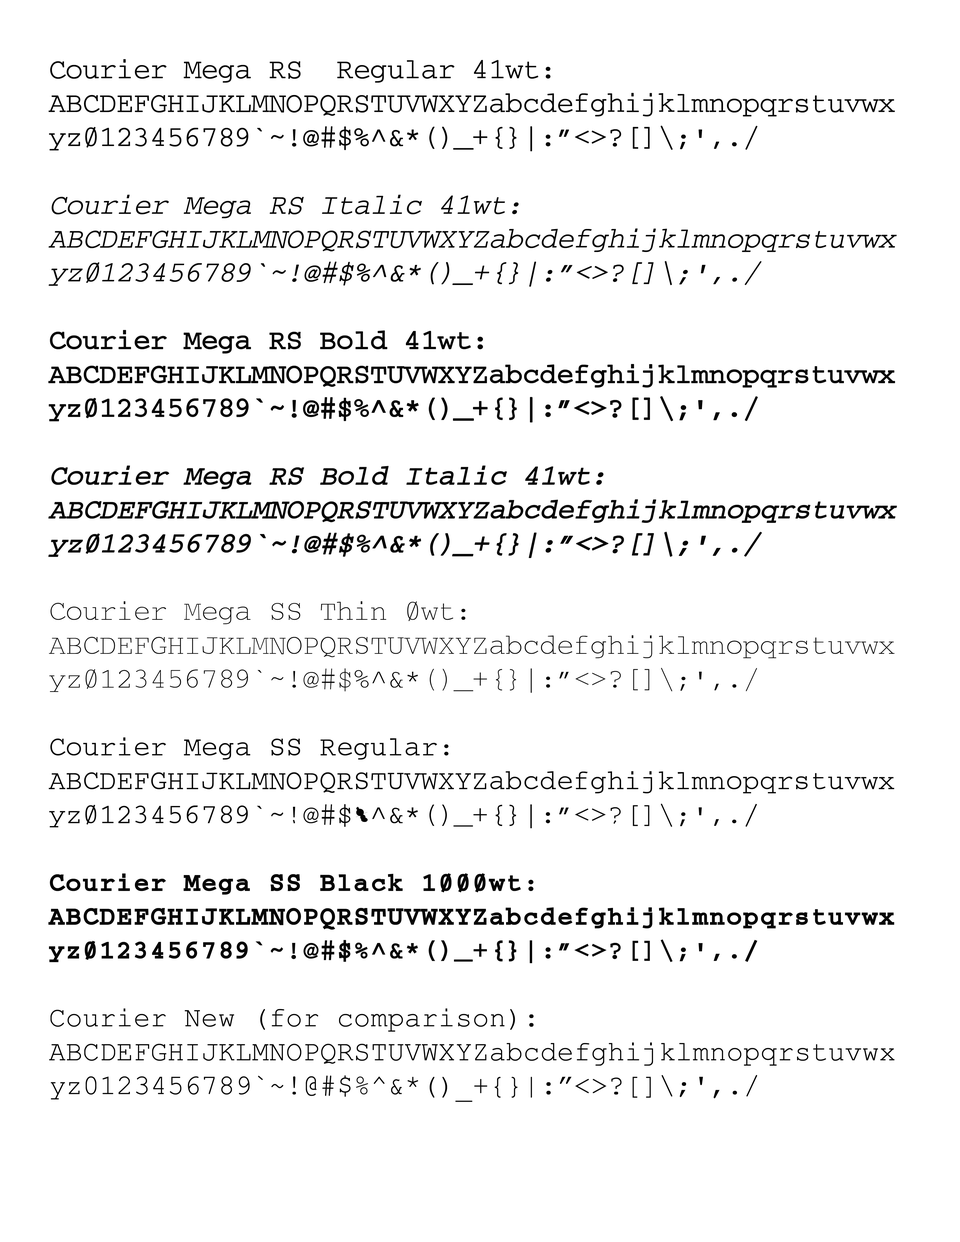
<style>
.page{position:relative;width:960px;height:1242px;background:#ffffff}
.page>*{position:absolute;margin:0}
.t1{font:28.2px "CourierMegaRS-BoldItalic";color:#050505}
.t2{font:28.2px "CourierMegaRS";color:#050505}
.t3{font:28.2px "CourierMegaRS-Italic";color:#050505}
.t4{font:28.2px "CourierMegaRS-Bold";color:#050505}
.t5{font:28.2px "CourierMegaSSThin0wt-Thin";color:#050505}
.t6{font:28.2px "CourierMegaSS";color:#050505}
.t7{font:28.2px "CourerMegaSSBlack1000wt-Black";color:#050505}
.t8{font:28.2px "CourierNewPSMT";color:#050505}
</style>
<div class="page">
<p class="t1" style="left:48px;top:59px;width:849px;height:1043px"><span class="t2">Courier Mega RS  Regular 41wt:<br>ABCDEFGHIJKLMNOPQRSTUVWXYZabcdefghijklmnopqrstuvwxyz0123456789`~!@#$%^&amp;*()_+{}|:”&lt;&gt;?[]\;',./<br><br></span><span class="t3">Courier Mega RS Italic 41wt:<br>ABCDEFGHIJKLMNOPQRSTUVWXYZabcdefghijklmnopqrstuvwxyz0123456789`~!@#$%^&amp;*()_+{}|:”&lt;&gt;?[]\;',./<br><br></span><span class="t4">Courier Mega RS Bold 41wt:<br>ABCDEFGHIJKLMNOPQRSTUVWXYZabcdefghijklmnopqrstuvwxyz0123456789`~!@#$%^&amp;*()_+{}|:”&lt;&gt;?[]\;',./<br><br></span>Courier Mega RS Bold Italic 41wt:<br>ABCDEFGHIJKLMNOPQRSTUVWXYZabcdefghijklmnopqrstuvwxyz0123456789`~!@#$%^&amp;*()_+{}|:”&lt;&gt;?[]\;',./<br><br><span class="t5">Courier Mega SS Thin 0wt:<br>ABCDEFGHIJKLMNOPQRSTUVWXYZabcdefghijklmnopqrstuvwxyz0123456789`~!@#$%^&amp;*()_+{}|:”&lt;&gt;?[]\;',./<br><br></span><span class="t6">Courier Mega SS Regular:<br>ABCDEFGHIJKLMNOPQRSTUVWXYZabcdefghijklmnopqrstuvwxyz0123456789`~!@#$%^&amp;*()_+{}|:”&lt;&gt;?[]\;',./<br><br></span><span class="t7">Courier Mega SS Black 1000wt:<br>ABCDEFGHIJKLMNOPQRSTUVWXYZabcdefghijklmnopqrstuvwxyz0123456789`~!@#$%^&amp;*()_+{}|:”&lt;&gt;?[]\;',./<br><br></span><span class="t8">Courier New (for comparison):<br>ABCDEFGHIJKLMNOPQRSTUVWXYZabcdefghijklmnopqrstuvwxyz0123456789`~!@#$%^&amp;*()_+{}|:”&lt;&gt;?[]\;',./</span></p>
</div>
